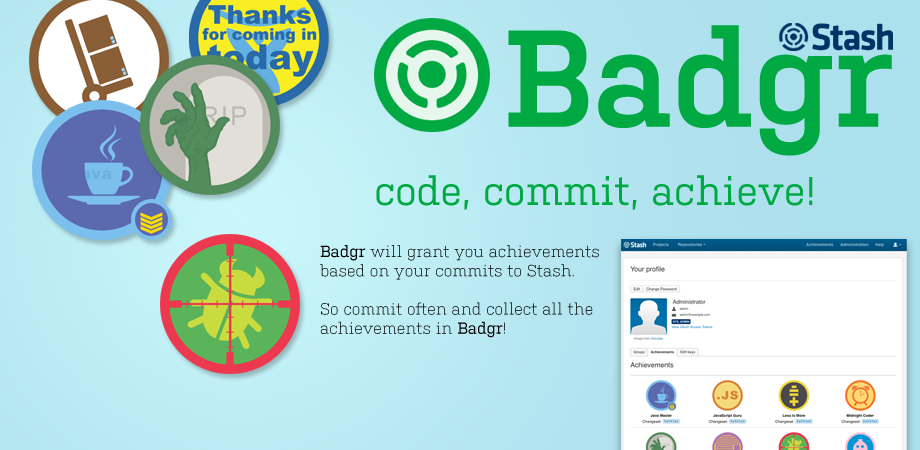
<style>
.page{position:relative;width:920px;height:450px}
.page>*{position:absolute;margin:0}
.t1{font:137.2px "KulturistaSemiBold";color:#00a942}
.t2{font:40px "Kulturista";color:#00a942}
.t3{font:16px "KulturistaLight";color:#000000}
.t4{font:16px "Kulturista";color:#000000}
</style>
<div class="page">
<p class="t1" style="left:508px;top:25px;width:384px;height:131px">Badgr</p>
<p class="t2" style="left:376px;top:175px;width:437px;height:35px">code, commit, achieve!</p>
<p class="t3" style="left:320px;top:245px;width:279px;height:93px"><span class="t4">Badgr </span>will grant you achievements<br>based on your commits to Stash.<br><br>So commit often and collect all the<br>achievements in <span class="t4">Badgr</span>!</p>
</div>
